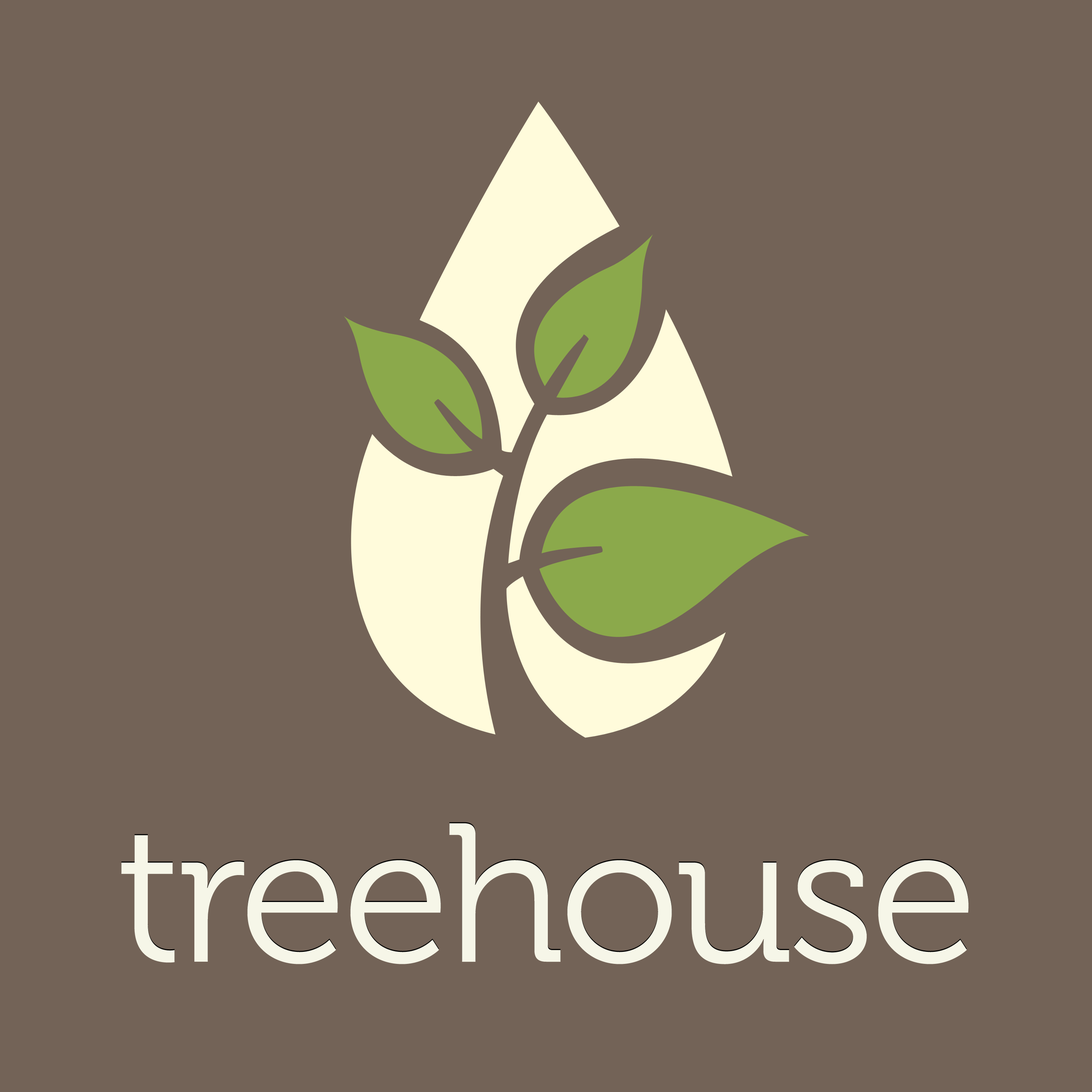
<style>
.page{position:relative;width:1092px;height:1092px;background:#736357}
.page>*{position:absolute;margin:0}
.t1{font:196.9px "Museo300-Regular";letter-spacing:-0.025em;color:#f6f6e8}
</style>
<div class="page">
<p class="t1" style="left:121px;top:823px;width:848px;height:141px">treehouse</p>
</div>
